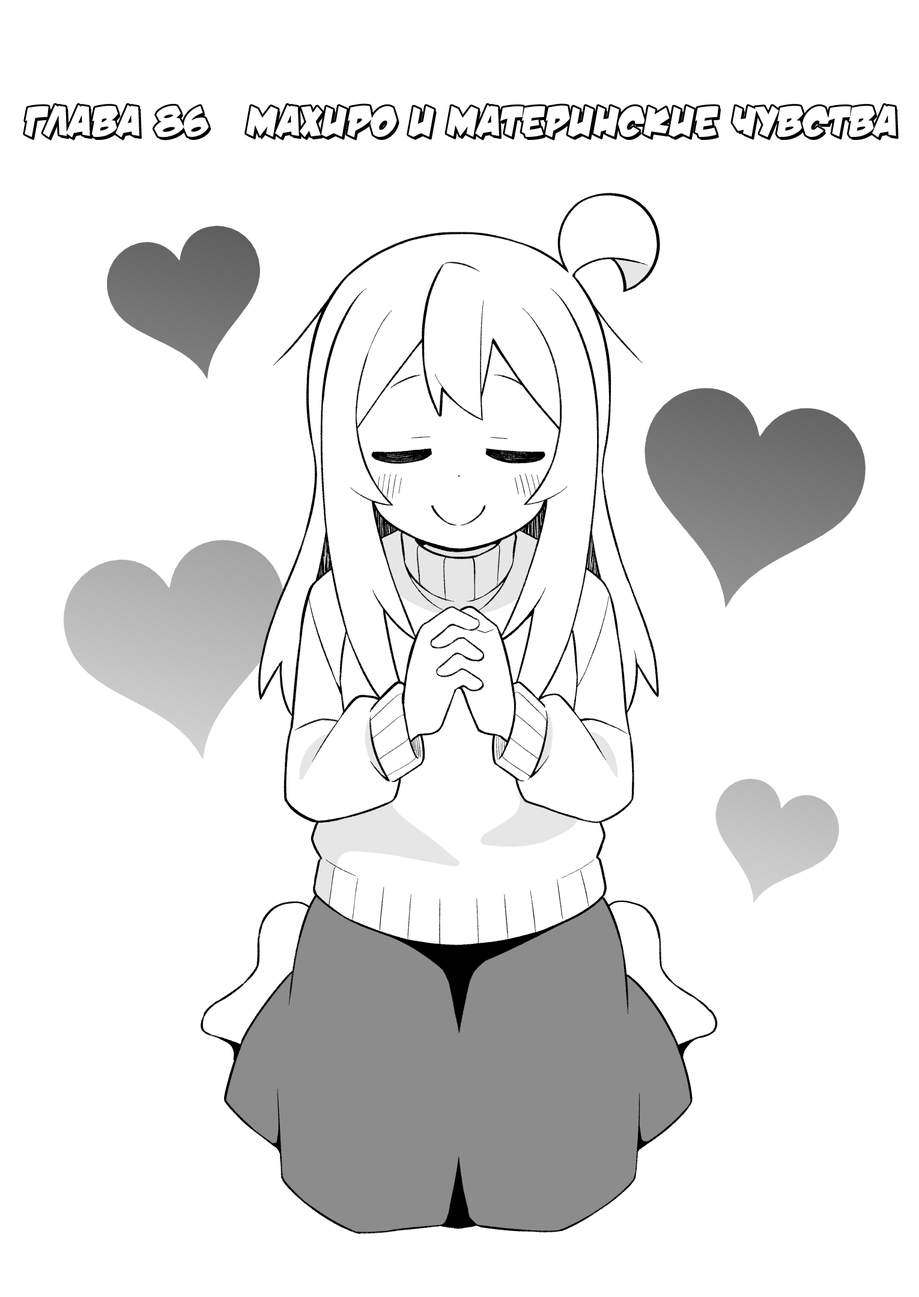
<style>
.page{position:relative;width:919px;height:1297px;background:#ffffff}
.page>*{position:absolute;margin:0}
.t1{font:43.2px "v_DamnNoisyKids";color:#ffffff;text-transform:uppercase}
</style>
<div class="page">
<p class="t1" style="left:25px;top:105px;width:871px;height:33px">Глава 86   Махиро и материнские чувства</p>
</div>
